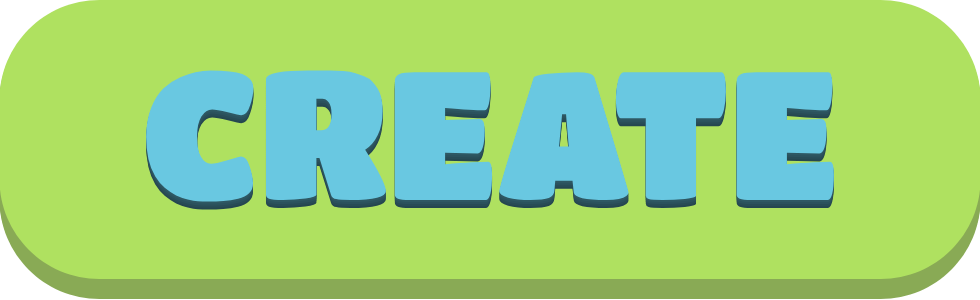
<style>
.page{position:relative;width:980px;height:300px;background:#afe160}
.page>*{position:absolute;margin:0}
.t1{font:180px "TitanOne";color:#69c8e1}
</style>
<div class="page">
<p class="t1" style="left:146px;top:70px;width:688px;height:132px">CREATE</p>
</div>
